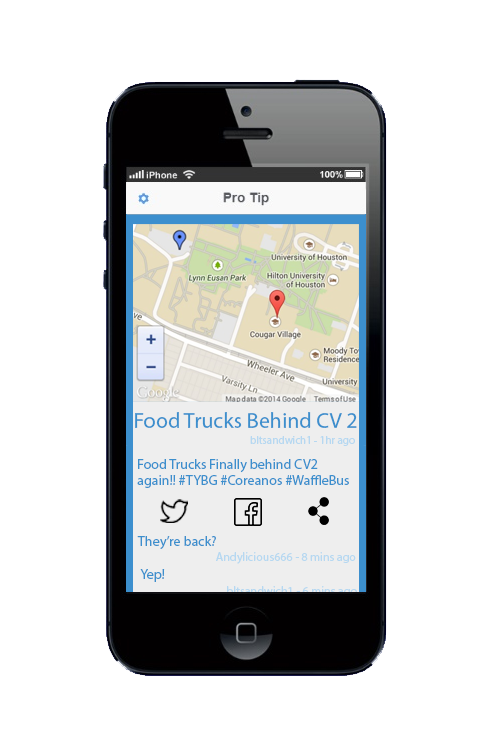
<style>
.page{position:relative;width:500px;height:750px;background:#ffffff}
.page>*{position:absolute;margin:0}
.t1{font:22px "MyriadPro-Regular";color:#3c8fcd}
.t2{font:11px "MyriadPro-Regular";color:#b6d8f1}
.t3{font:14px "MyriadPro-Regular";color:#3c8fcd}
.t4{font:12px "MyriadPro-Regular";color:#b6d8f1}
</style>
<div class="page">
<p class="t1" style="left:135px;top:412px;width:222px;height:16px">Food Trucks Behind CV 2</p>
<p class="t2" style="left:250px;top:436px;width:105px;height:10px">bltsandwich1 - 1hr ago</p>
<p class="t3" style="left:137px;top:459px;width:212px;height:29px">Food Trucks Finally behind CV2 again!! #TYBG #Coreanos #WaffleBus</p>
<p class="t3" style="left:137px;top:536px;width:79px;height:13px">They’re back?</p>
<p class="t4" style="left:216px;top:552px;width:140px;height:12px">Andylicious666 - 8 mins ago</p>
<p class="t3" style="left:140px;top:569px;width:25px;height:13px">Yep!</p>
</div>
